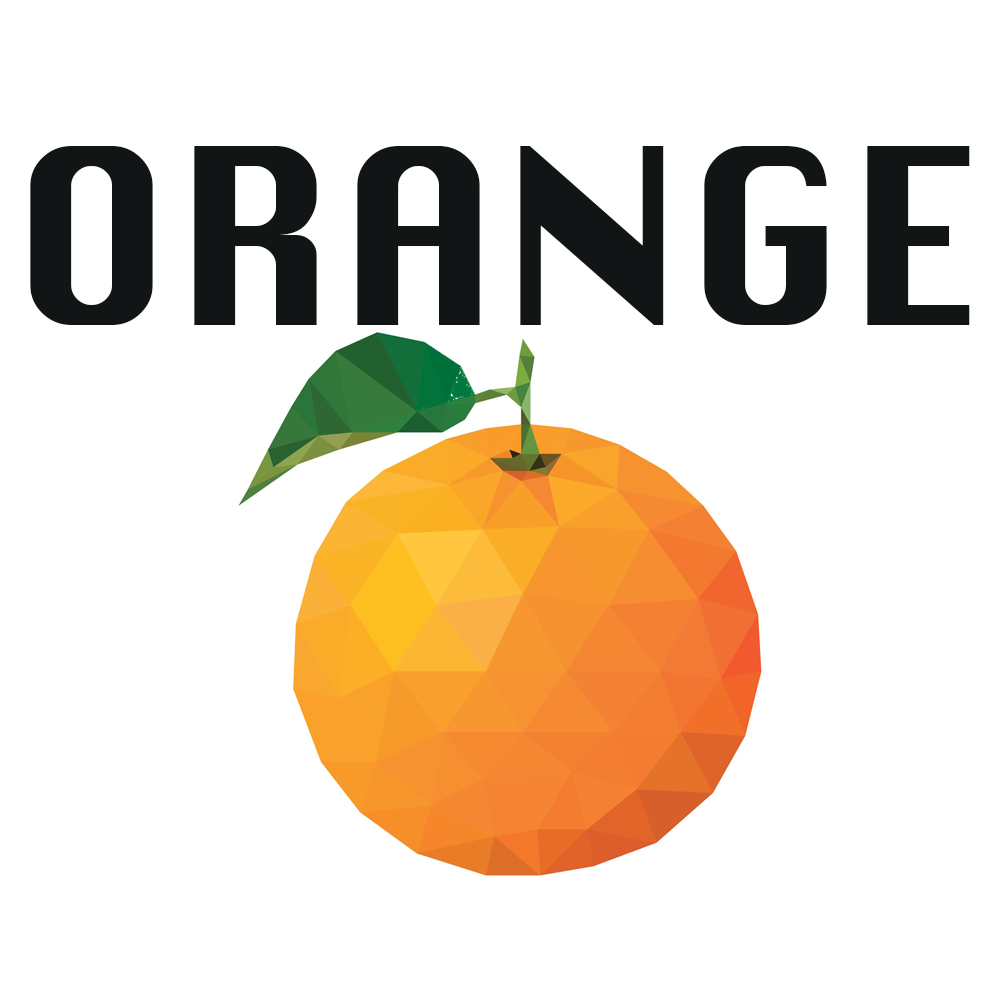
<style>
.page{position:relative;width:1000px;height:1000px;background:#ffffff}
.page>*{position:absolute;margin:0}
.t1{font:238.4px "Silom";color:#121516}
</style>
<div class="page">
<p class="t1" style="left:30px;top:146px;width:940px;height:179px">ORANGE</p>
</div>
